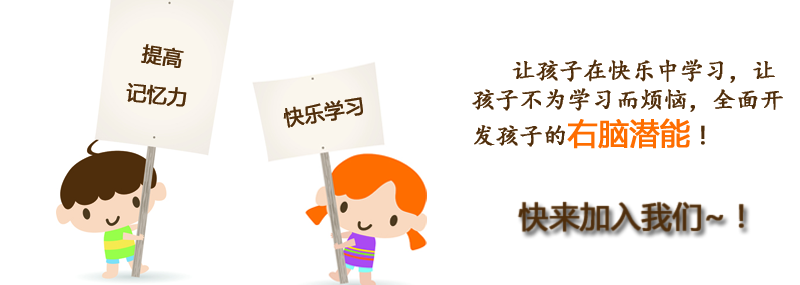
<style>
.page{position:relative;width:800px;height:285px;background:#ffffff}
.page>*{position:absolute;margin:0}
.t1{font:20px "MicrosoftYaHei";color:#4f2e0c;font-weight:bold}
.t2{font:24px "¿¬Ìå-Regular";color:#4f2e0c;font-weight:bold}
.t3{font:30px "MicrosoftYaHei";color:#fe6d00;font-weight:bold}
.t4{font:24px "MicrosoftYaHei";color:#4f2e0c;font-weight:bold}
</style>
<div class="page">
<p class="t1" style="left:141px;top:44px;width:43px;height:24px;rotate:9deg">提高</p>
<p class="t2" style="left:472px;top:59px;width:311px;height:90px"><span class="t1">      </span>让孩子在快乐中学习，让<br>孩子不为学习而烦恼，全面开<br>发孩子的<span class="t3">右脑潜能</span><span class="t4">！</span></p>
<p class="t1" style="left:126px;top:83px;width:61px;height:24px;rotate:5deg">记忆力</p>
<p class="t1" style="left:283px;top:97px;width:80px;height:31px;rotate:-9deg">快乐学习</p>
</div>
